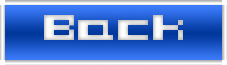
<style>
.page{position:relative;width:227px;height:65px}
.page>*{position:absolute;margin:0}
.t1{font:39.7px "PIXleft_5";color:#dddddd}
</style>
<div class="page">
<p class="t1" style="left:44px;top:15px;width:139px;height:25px">Back</p>
</div>
